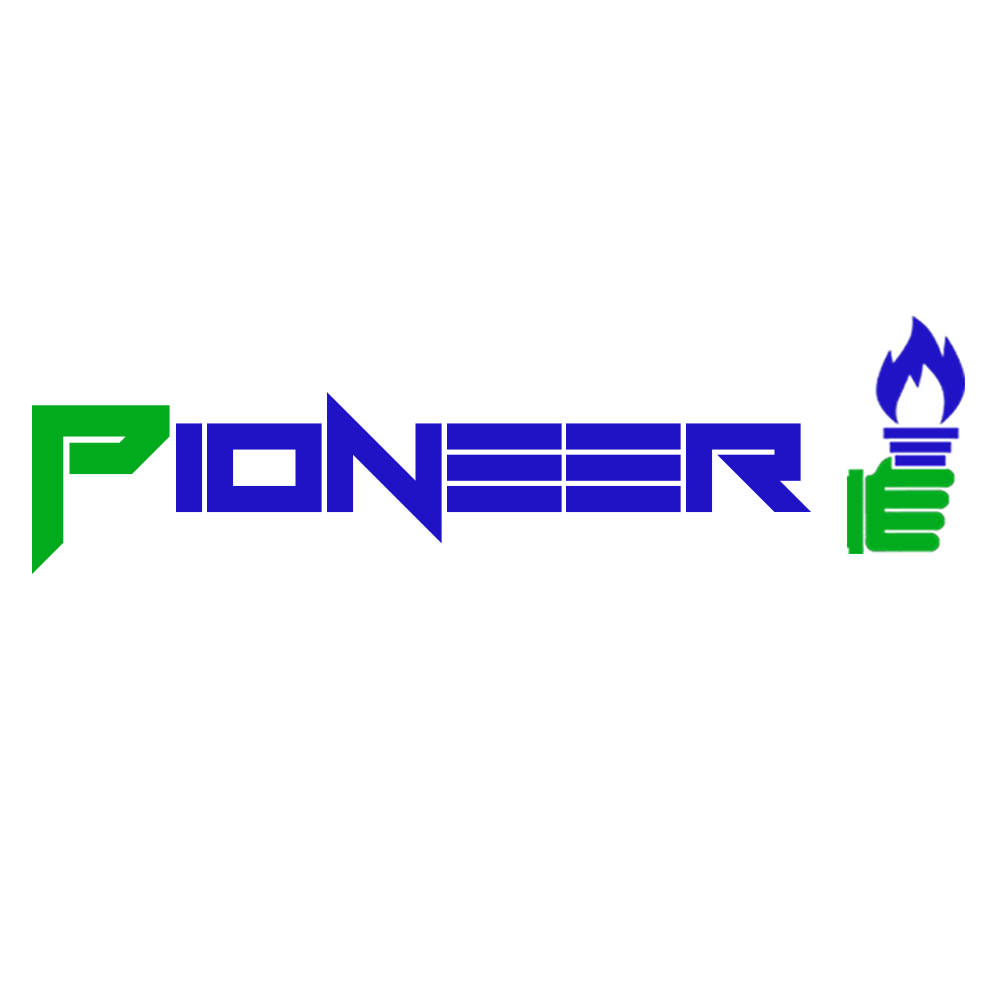
<style>
.page{position:relative;width:1000px;height:1000px;background:#ffffff}
.page>*{position:absolute;margin:0}
.t1{font:166.7px "FoughtKnight";color:#1f13c5}
.t2{font:200px "FoughtKnight";color:#02ab1e}
</style>
<div class="page">
<p class="t1" style="left:32px;top:392px;width:779px;height:182px"><span class="t2">P</span>ioneer</p>
</div>
